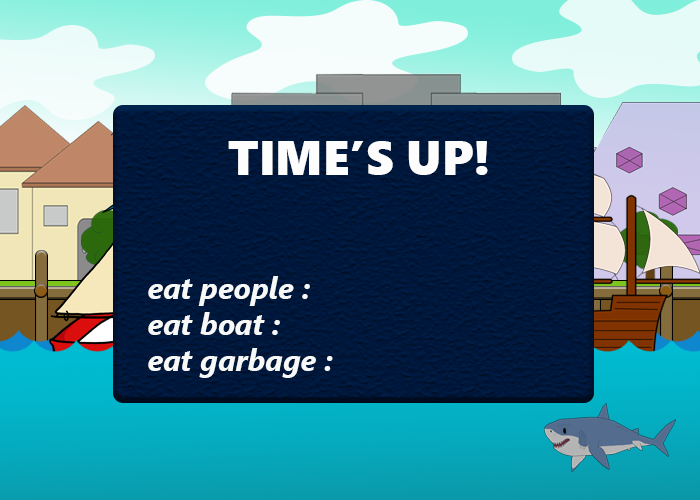
<style>
.page{position:relative;width:700px;height:500px}
.page>*{position:absolute;margin:0}
.t1{font:48px "SegoeUIBlack";color:#fdfdfd}
.t2{font:30px "SegoeUI-BoldItalic";color:#f7f9f9}
</style>
<div class="page">
<p class="t1" style="left:228px;top:141px;width:260px;height:34px">TIME’S UP!</p>
<p class="t2" style="left:148px;top:276px;width:185px;height:102px">eat people :<br>     eat boat :<br>     eat garbage :</p>
</div>
